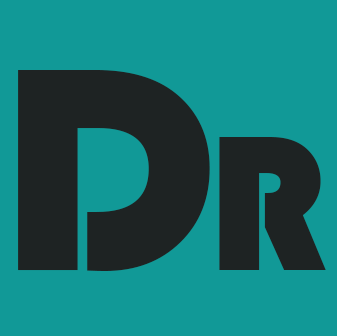
<style>
.page{position:relative;width:337px;height:336px;background:#119997}
.page>*{position:absolute;margin:0}
.t1{font:300px "Bauhaus93";color:#1e2323}
.t2{font:200px "Bauhaus93";color:#1e2323}
</style>
<div class="page">
<p class="t1" style="left:18px;top:70px;width:192px;height:201px">D</p>
<p class="t2" style="left:219px;top:137px;width:107px;height:133px">R</p>
</div>
